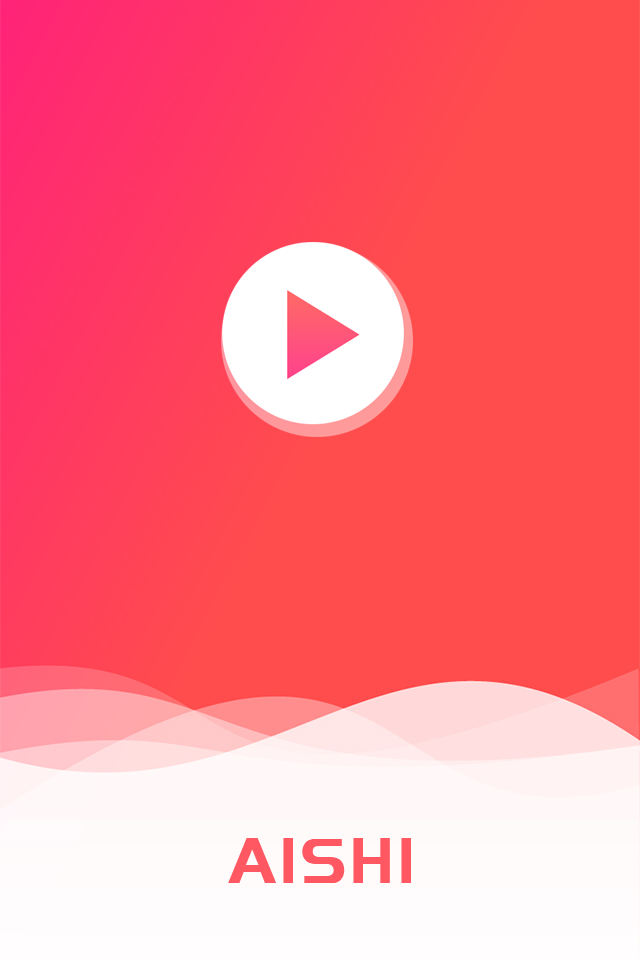
<style>
.page{position:relative;width:640px;height:960px;background:#ff4d4d}
.page>*{position:absolute;margin:0}
.t1{font:66.7px "PangMenZhengDao";letter-spacing:0.04em;color:#ff5862}
</style>
<div class="page">
<p class="t1" style="left:228px;top:838px;width:183px;height:45px">AISHI</p>
</div>
